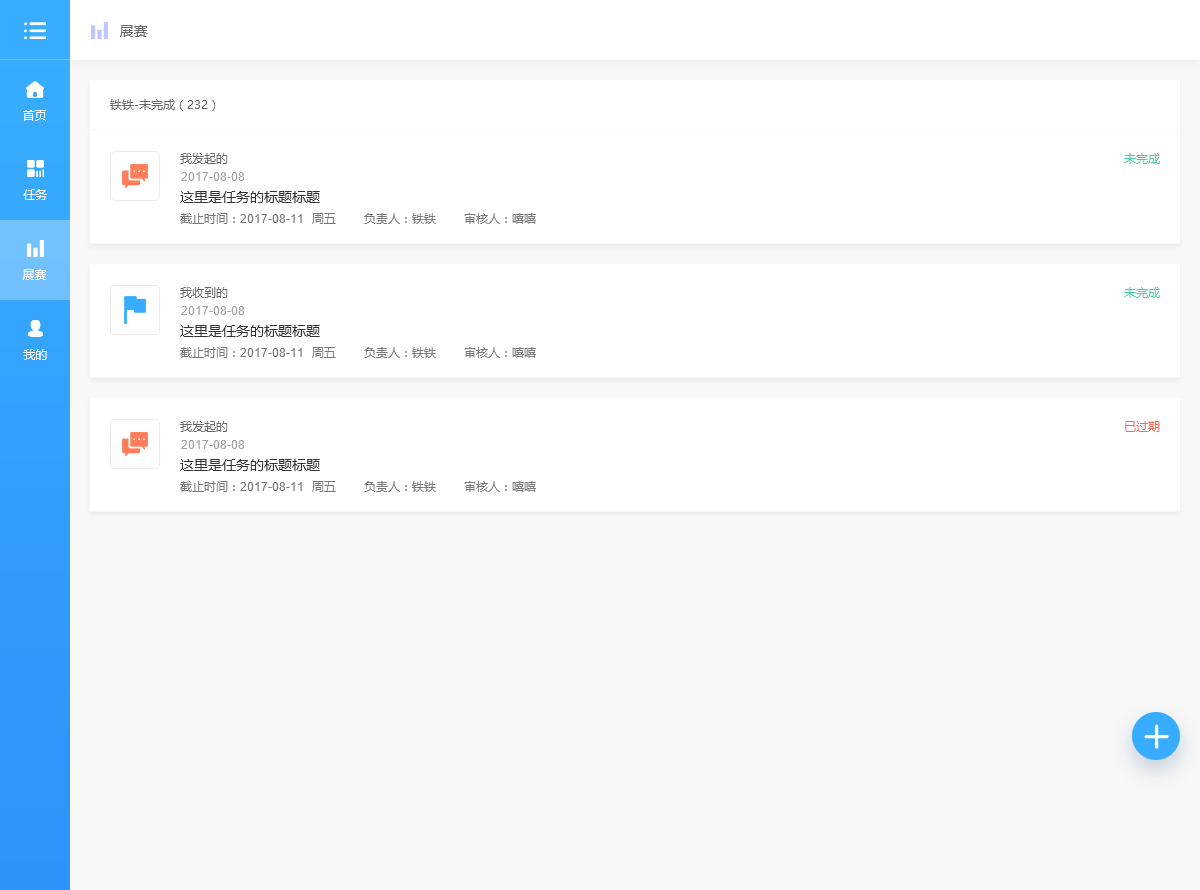
<style>
.page{position:relative;width:1200px;height:890px;background:#f8f8f8}
.page>*{position:absolute;margin:0}
.t1{font:14px "MicrosoftYaHei";color:#666666}
.t2{font:12px "MicrosoftYaHei";color:#666666}
.t3{font:12px "MicrosoftYaHei";color:#ffffff}
.t4{font:12px "MicrosoftYaHei";color:#3fcca7}
.t5{font:12px "ArialMT";color:#a3a3a3}
.t6{font:14px "MicrosoftYaHei";color:#333333}
.t7{font:12px "MicrosoftYaHei";color:#777777}
.t8{font:12px "ArialMT";color:#777777}
.t9{font:12px "MicrosoftYaHei";color:#fd6c57}
</style>
<div class="page">
<p class="t1" style="left:120px;top:25px;width:28px;height:12px">展赛</p>
<p class="t2" style="left:110px;top:99px;width:106px;height:12px">铁铁-未完成（232）</p>
<p class="t3" style="left:23px;top:110px;width:24px;height:11px">首页</p>
<p class="t2" style="left:180px;top:153px;width:48px;height:11px">我发起的</p>
<p class="t4" style="left:1124px;top:153px;width:36px;height:11px">未完成</p>
<p class="t5" style="left:181px;top:172px;width:64px;height:9px">2017-08-08</p>
<p class="t3" style="left:23px;top:189px;width:24px;height:11px">任务</p>
<p class="t6" style="left:180px;top:191px;width:140px;height:12px">这里是任务的标题标题</p>
<p class="t7" style="left:180px;top:213px;width:356px;height:11px">截止时间：<span class="t8">2017-08-11</span>  周五       负责人：铁铁       审核人：嘻嘻</p>
<p class="t3" style="left:22px;top:269px;width:24px;height:11px">展赛</p>
<p class="t2" style="left:180px;top:287px;width:48px;height:11px">我收到的</p>
<p class="t4" style="left:1124px;top:287px;width:36px;height:11px">未完成</p>
<p class="t5" style="left:181px;top:306px;width:64px;height:9px">2017-08-08</p>
<p class="t6" style="left:180px;top:325px;width:140px;height:12px">这里是任务的标题标题</p>
<p class="t3" style="left:23px;top:349px;width:24px;height:11px">我的</p>
<p class="t7" style="left:180px;top:347px;width:356px;height:11px">截止时间：<span class="t8">2017-08-11</span>  周五       负责人：铁铁       审核人：嘻嘻</p>
<p class="t2" style="left:180px;top:421px;width:48px;height:11px">我发起的</p>
<p class="t9" style="left:1125px;top:421px;width:35px;height:11px">已过期</p>
<p class="t5" style="left:181px;top:440px;width:64px;height:9px">2017-08-08</p>
<p class="t6" style="left:180px;top:459px;width:140px;height:12px">这里是任务的标题标题</p>
<p class="t7" style="left:180px;top:481px;width:356px;height:11px">截止时间：<span class="t8">2017-08-11</span>  周五       负责人：铁铁       审核人：嘻嘻</p>
</div>
